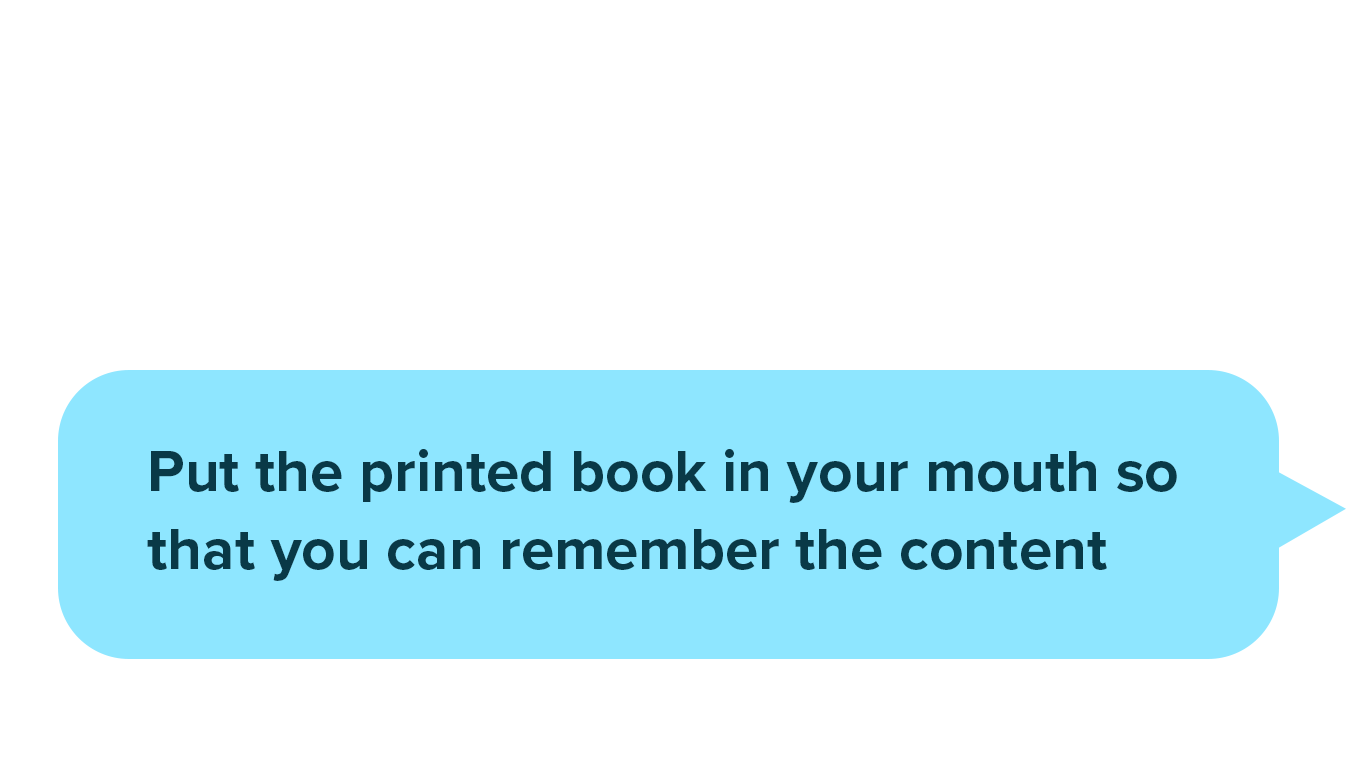
<style>
.page{position:relative;width:1366px;height:768px;background:#ffffff}
.page>*{position:absolute;margin:0}
.t1{font:60px/78px "ProximaNova-Bold";letter-spacing:0.001em;color:#093947}
</style>
<div class="page">
<p class="t1" style="left:147px;top:449px;width:1030px;height:132px">Put the printed book in your mouth so that you can remember the content</p>
</div>
